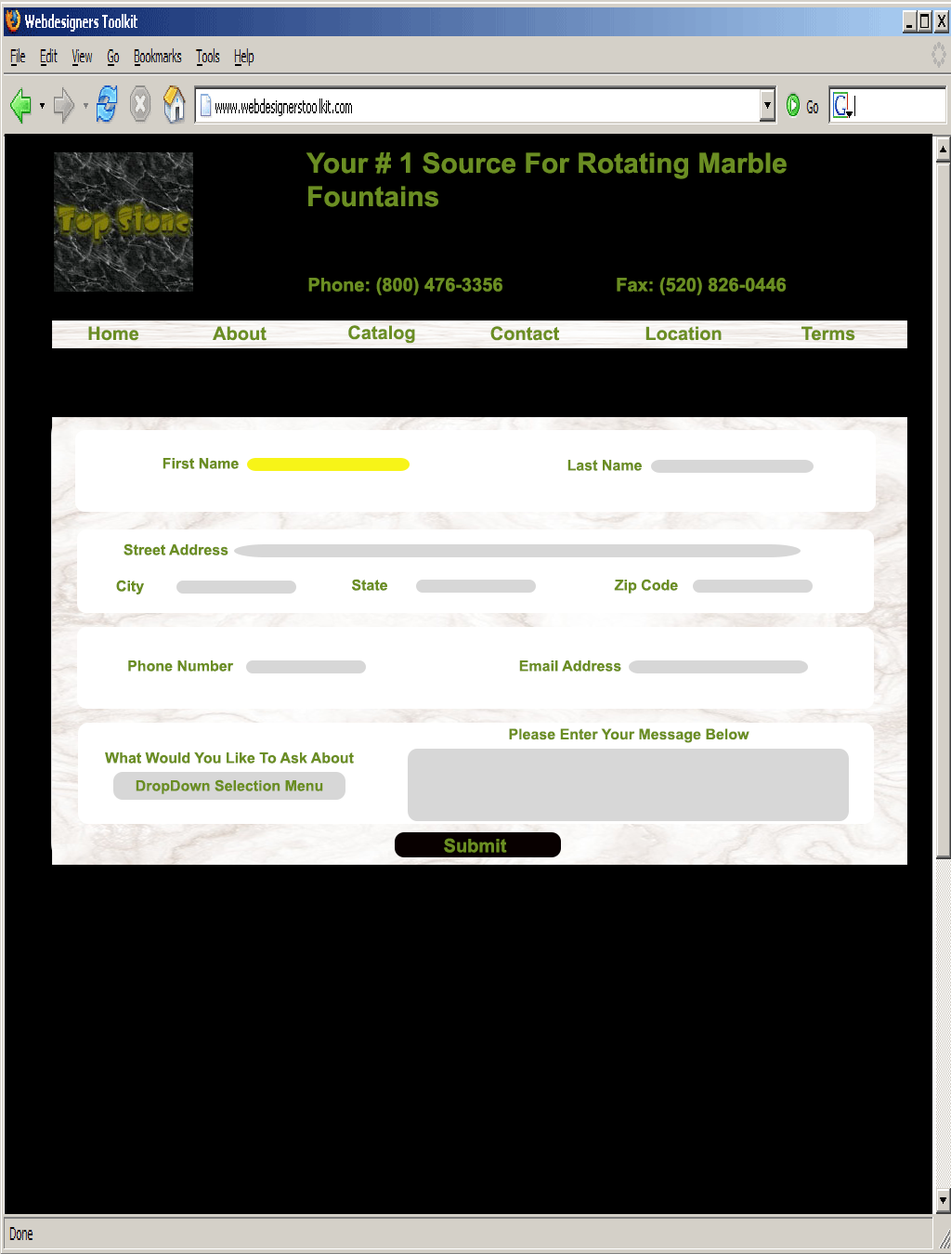
<style>
.page{position:relative;width:951px;height:1254px;background:#000000}
.page>*{position:absolute;margin:0}
.t1{font:27.9px "Arial-BoldMT";color:#6b8e23}
.t2{font:18.6px "Arial-BoldMT";color:#6b8e23}
.t3{font:14.9px "Arial-BoldMT";color:#6b8e23}
</style>
<div class="page">
<p class="t1" style="left:306px;top:152px;width:481px;height:55px">Your # 1 Source For Rotating Marble<br>Fountains</p>
<p class="t2" style="left:308px;top:277px;width:194px;height:18px">Phone: (800) 476-3356</p>
<p class="t2" style="left:617px;top:277px;width:169px;height:18px">Fax: (520) 826-0446</p>
<p class="t2" style="left:88px;top:326px;width:50px;height:15px">Home</p>
<p class="t2" style="left:213px;top:326px;width:54px;height:15px">About</p>
<p class="t2" style="left:348px;top:325px;width:67px;height:19px">Catalog</p>
<p class="t2" style="left:490px;top:326px;width:69px;height:15px">Contact</p>
<p class="t2" style="left:645px;top:326px;width:77px;height:15px">Location</p>
<p class="t2" style="left:802px;top:326px;width:53px;height:15px">Terms</p>
<p class="t3" style="left:163px;top:458px;width:76px;height:11px">First Name</p>
<p class="t3" style="left:567px;top:460px;width:75px;height:11px">Last Name</p>
<p class="t3" style="left:124px;top:543px;width:104px;height:12px">Street Address</p>
<p class="t3" style="left:116px;top:580px;width:28px;height:14px">City</p>
<p class="t3" style="left:352px;top:579px;width:35px;height:12px">State</p>
<p class="t3" style="left:614px;top:579px;width:64px;height:14px">Zip Code</p>
<p class="t3" style="left:128px;top:660px;width:106px;height:11px">Phone Number</p>
<p class="t3" style="left:519px;top:660px;width:102px;height:11px">Email Address</p>
<p class="t3" style="left:509px;top:728px;width:241px;height:15px">Please Enter Your Message Below</p>
<p class="t3" style="left:105px;top:752px;width:249px;height:11px">What Would You Like To Ask About</p>
<p class="t3" style="left:136px;top:779px;width:187px;height:15px">DropDown Selection Menu</p>
<p class="t2" style="left:444px;top:838px;width:63px;height:15px">Submit</p>
</div>
